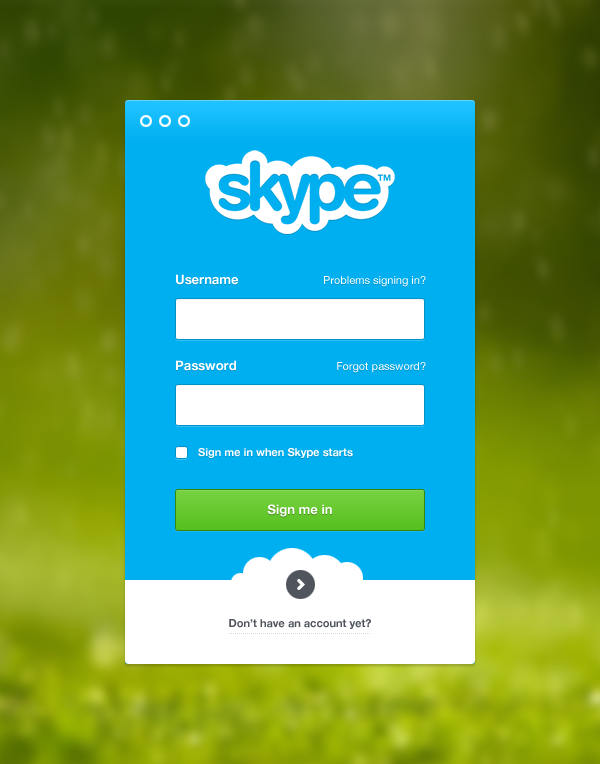
<style>
.page{position:relative;width:600px;height:764px;background:#00aff0}
.page>*{position:absolute;margin:0}
.t1{font:13px "HelveticaNeue-Bold";color:#ffffff}
.t2{font:11px "HelveticaNeue";color:#ffffff}
.t3{font:11px "HelveticaNeue-Bold";color:#ffffff}
.t4{font:11px "HelveticaNeue-Bold";color:#50545c}
</style>
<div class="page">
<p class="t1" style="left:176px;top:274px;width:62px;height:11px">Username</p>
<p class="t2" style="left:324px;top:276px;width:102px;height:11px">Problems signing in?</p>
<p class="t1" style="left:176px;top:360px;width:60px;height:11px">Password</p>
<p class="t2" style="left:337px;top:362px;width:89px;height:11px">Forgot password?</p>
<p class="t3" style="left:198px;top:448px;width:155px;height:10px">Sign me in when Skype starts</p>
<p class="t1" style="left:267px;top:504px;width:65px;height:13px">Sign me in</p>
<p class="t4" style="left:229px;top:619px;width:142px;height:10px">Don’t have an account yet?</p>
</div>
